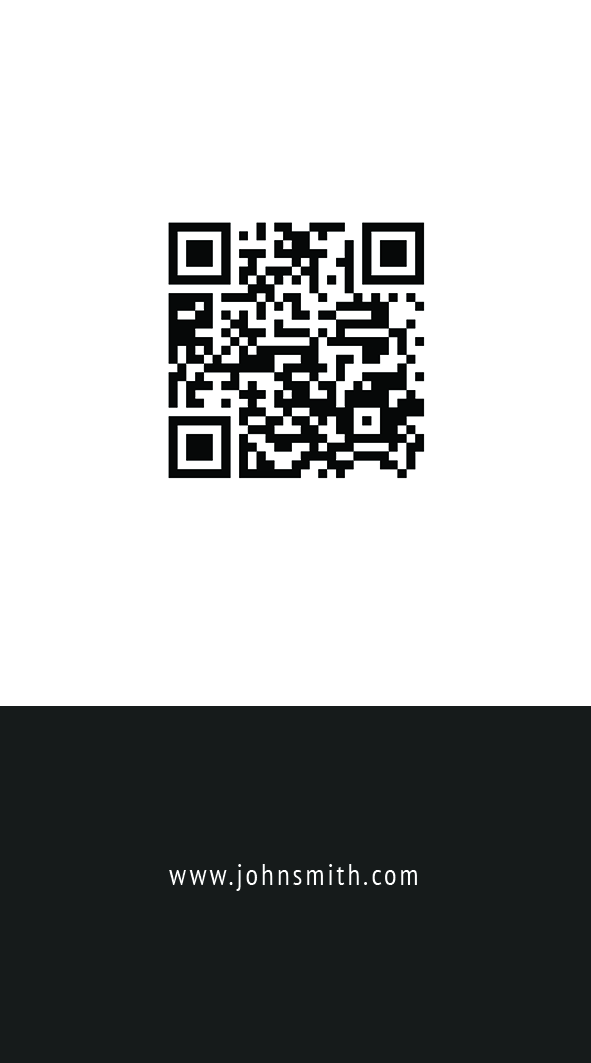
<style>
.page{position:relative;width:591px;height:1063px;background:#ffffff}
.page>*{position:absolute;margin:0}
.t1{font:29.2px "PTSans-Narrow";letter-spacing:0.1em;color:#ffffff}
</style>
<div class="page">
<p class="t1" style="left:169px;top:864px;width:248px;height:27px">www.johnsmith.com</p>
</div>
